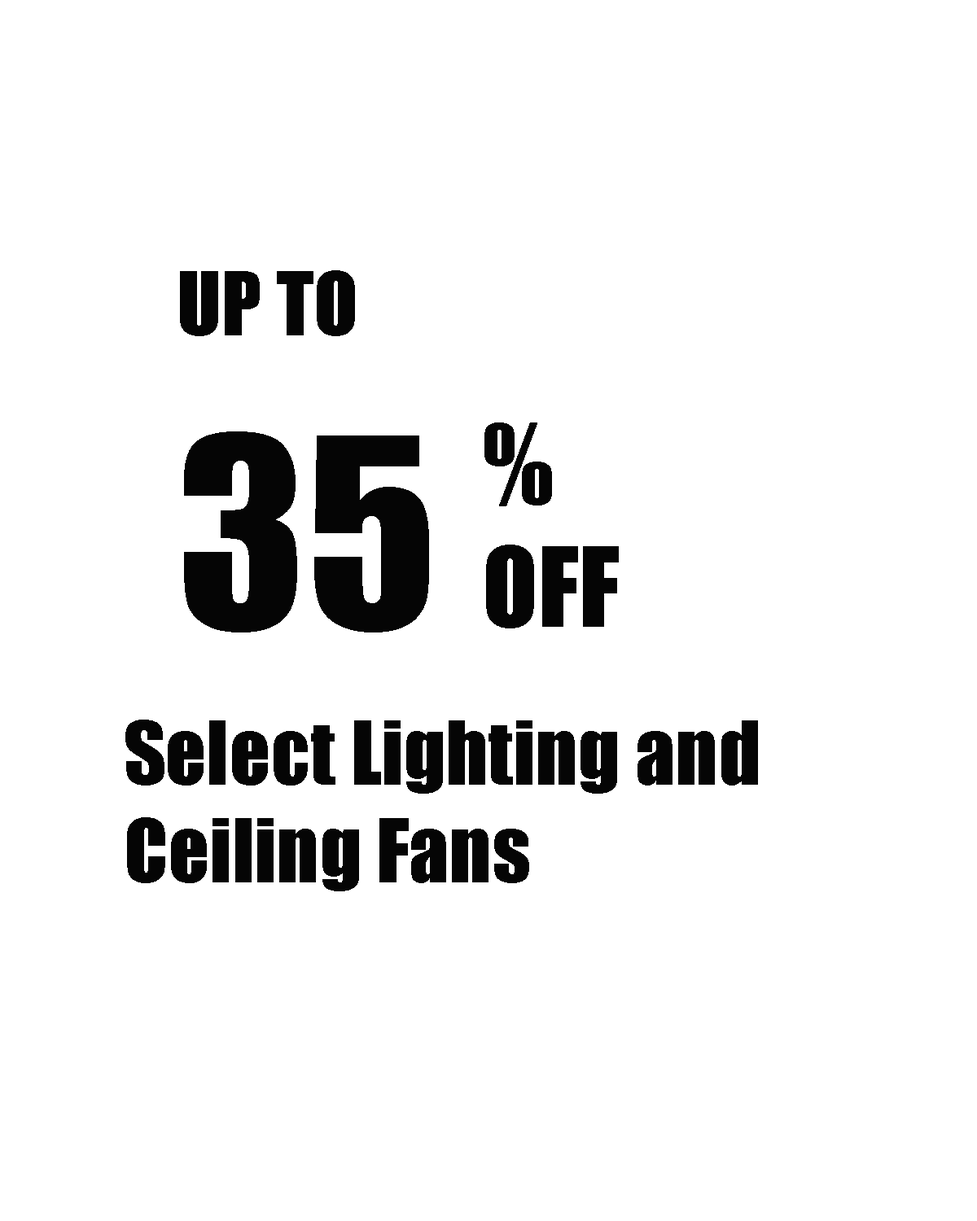
<style>
.page{position:relative;width:977px;height:1221px;background:#ffffff}
.page>*{position:absolute;margin:0}
.t1{font:81.4px "Impact";color:#050505}
.t2{font:244.2px "Impact";color:#050505}
.t3{font:101.7px "Impact";color:#050505}
</style>
<div class="page">
<p class="t1" style="left:180px;top:270px;width:249px;height:362px">UP TO<br><span class="t2">35</span></p>
<p class="t3" style="left:484px;top:422px;width:135px;height:206px">%<br>OFF</p>
<p class="t1" style="left:125px;top:720px;width:633px;height:171px">Select Lighting and <br>Ceiling Fans</p>
</div>
